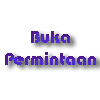
<style>
.page{position:relative;width:100px;height:100px;background:#ffffff}
.page>*{position:absolute;margin:0}
.t1{font:18px "Bauhaus93"}
</style>
<div class="page">
<p class="t1" style="left:5px;top:31px;width:91px;height:34px;text-align:center">Buka Permintaan</p>
</div>
